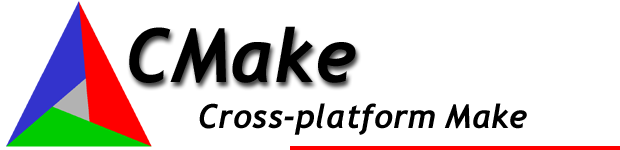
<style>
.page{position:relative;width:620px;height:150px;background:#ffffff}
.page>*{position:absolute;margin:0}
.t1{font:75px "Trebuchet-BoldItalic";color:#000000}
.t2{font:33.3px "Trebuchet-BoldItalic";color:#000000}
</style>
<div class="page">
<p class="t1" style="left:129px;top:26px;width:227px;height:57px">CMake</p>
<p class="t2" style="left:199px;top:103px;width:328px;height:32px">Cross-platform Make</p>
</div>
